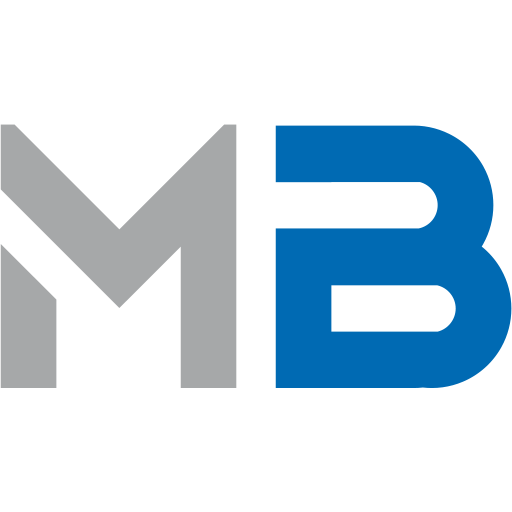
<style>
.page{position:relative;width:512px;height:512px;background:#ffffff}
.page>*{position:absolute;margin:0}
.t1{font:395.8px "AquireBold";color:#a6a8a9}
.t2{font:395.8px "AquireBold";color:#006ab3}
</style>
<div class="page">
<p class="t1" style="left:0px;top:124px;width:512px;height:264px">M<span class="t2">B</span></p>
</div>
